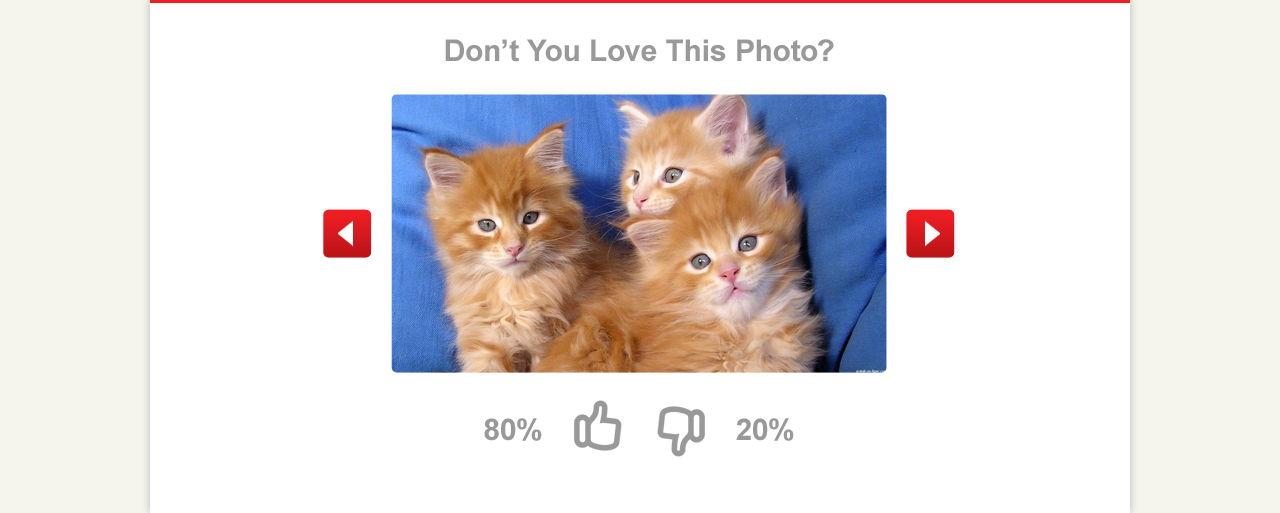
<style>
.page{position:relative;width:1280px;height:513px;background:#ffffff}
.page>*{position:absolute;margin:0}
.t1{font:30px "Arial-BoldMT";color:#999999}
</style>
<div class="page">
<p class="t1" style="left:445px;top:39px;width:389px;height:23px">Don’t You Love This Photo?</p>
<p class="t1" style="left:484px;top:418px;width:58px;height:23px">80%</p>
<p class="t1" style="left:736px;top:418px;width:58px;height:23px">20%</p>
</div>
